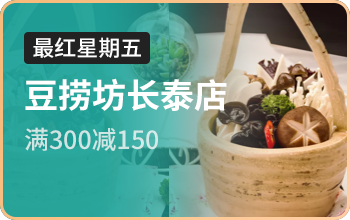
<style>
.page{position:relative;width:350px;height:220px}
.page>*{position:absolute;margin:0}
.t1{font:22px "SourceHanSansCN-Medium";color:#ffffff}
.t2{font:34px "SourceHanSansCN-Bold";color:#ffffff}
.t3{font:25px "SourceHanSansCN-Medium";color:#cfe7e4}
</style>
<div class="page">
<p class="t1" style="left:33px;top:37px;width:108px;height:21px">最红星期五</p>
<p class="t2" style="left:25px;top:78px;width:202px;height:33px">豆捞坊长泰店</p>
<p class="t3" style="left:25px;top:127px;width:133px;height:24px">满300减150</p>
</div>
